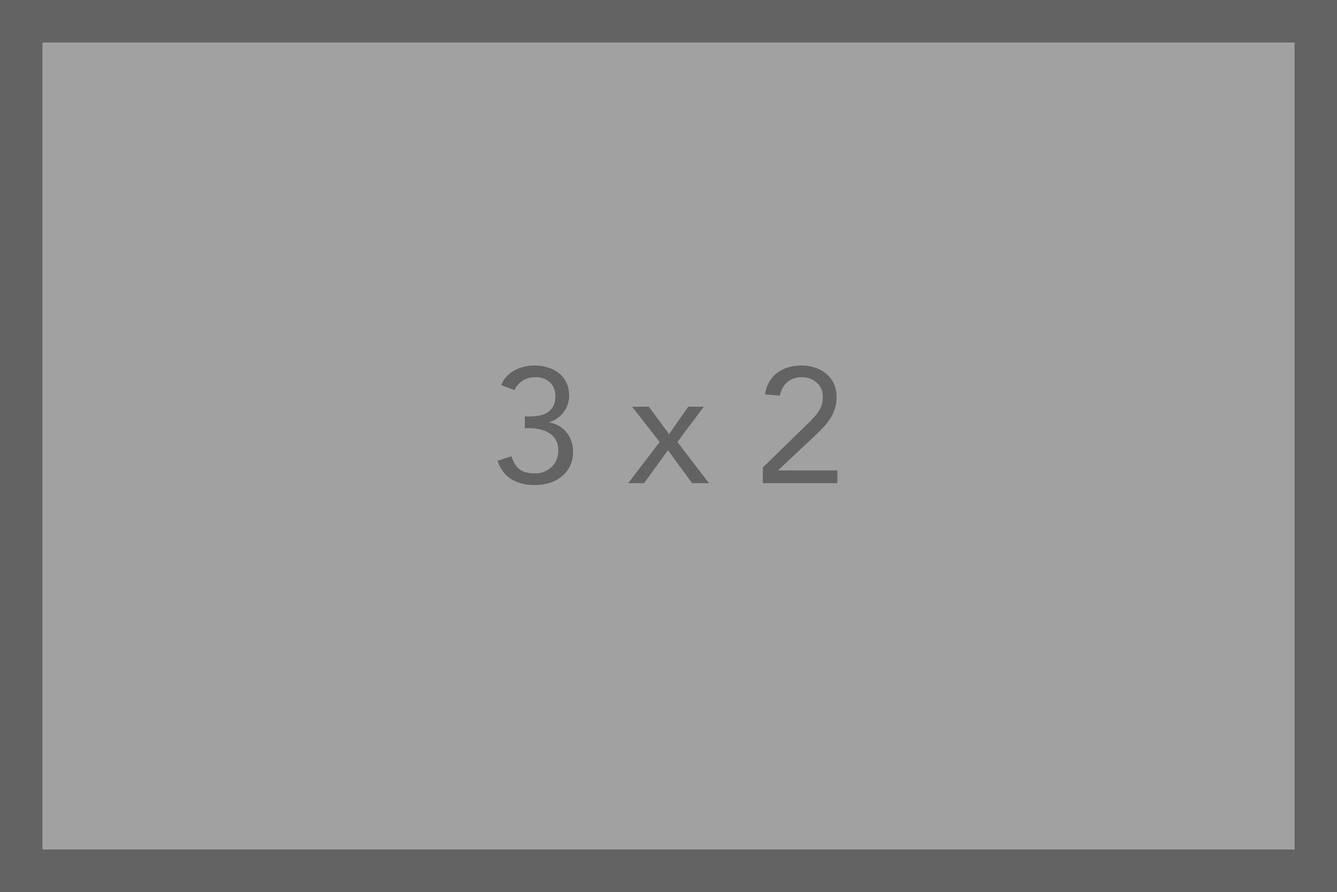
<style>
.page{position:relative;width:1337px;height:892px;background:#a1a1a1}
.page>*{position:absolute;margin:0}
.t1{font:163.4px "Avenir-Roman";color:#636363}
</style>
<div class="page">
<p class="t1" style="left:498px;top:365px;width:340px;height:120px">3 x 2</p>
</div>
